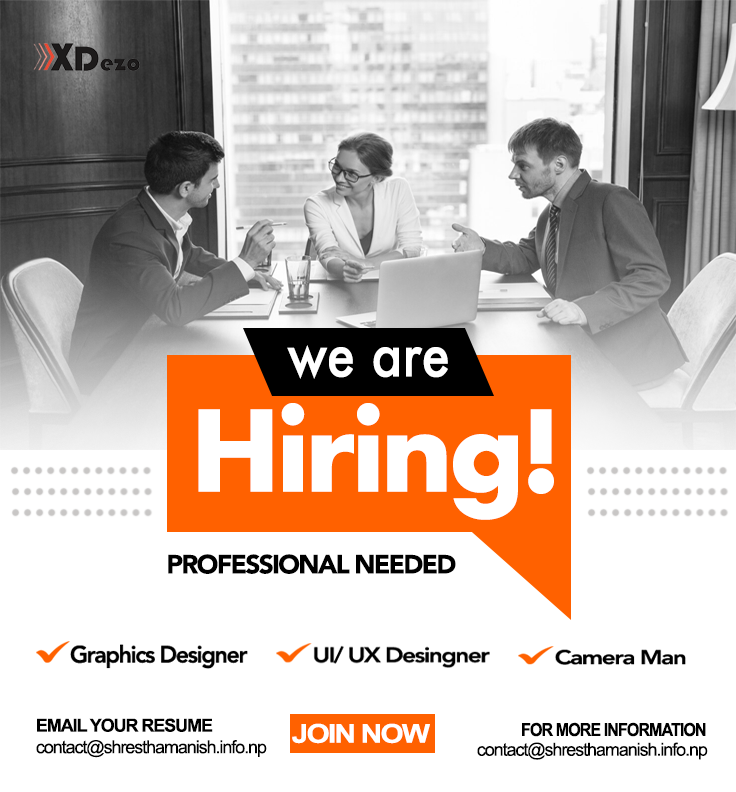
<style>
.page{position:relative;width:736px;height:792px;background:#ffffff}
.page>*{position:absolute;margin:0}
.t1{font:59.9px "Futura-Medium";color:#ffffff;scale:0.87 1}
.t2{font:109px "Futura-Bold";letter-spacing:-0.04em;color:#ffffff}
.t3{font:26px "Avenir-Black";letter-spacing:-0.06em;color:#000000}
.t4{font:18px "ArialMT";letter-spacing:-0.06em;color:#000000}
.t5{font:18px "Arial-BoldMT";letter-spacing:-0.06em;color:#000000}
.t6{font:18px "Arial-BoldMT";letter-spacing:-0.06em;color:#000000;scale:0.9 1}
</style>
<div class="page">
<p class="t1" style="left:287px;top:345px;width:161px;height:34px">we are</p>
<p class="t2" style="left:198px;top:403px;width:356px;height:117px">Hiring!</p>
<p class="t3" style="left:168px;top:554px;width:288px;height:20px">PROFESSIONAL NEEDED</p>
<p class="t4" style="left:36px;top:718px;width:231px;height:40px"><span class="t5">EMAIL YOUR RESUME<br></span>contact@shresthamanish.info.np</p>
<p class="t6" style="left:522px;top:722px;width:184px;height:15px">FOR MORE INFORMATION</p>
<p class="t4" style="left:477px;top:742px;width:231px;height:18px">contact@shresthamanish.info.np</p>
</div>
